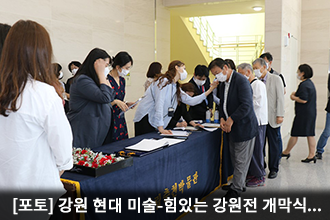
<style>
.page{position:relative;width:330px;height:220px}
.page>*{position:absolute;margin:0}
.t1{font:16px "NotoSansKR-Regular";color:#ffffff;font-weight:bold}
</style>
<div class="page">
<p class="t1" style="left:13px;top:197px;width:308px;height:18px">[포토] 강원 현대 미술-힘있는 강원전 개막식...</p>
</div>
